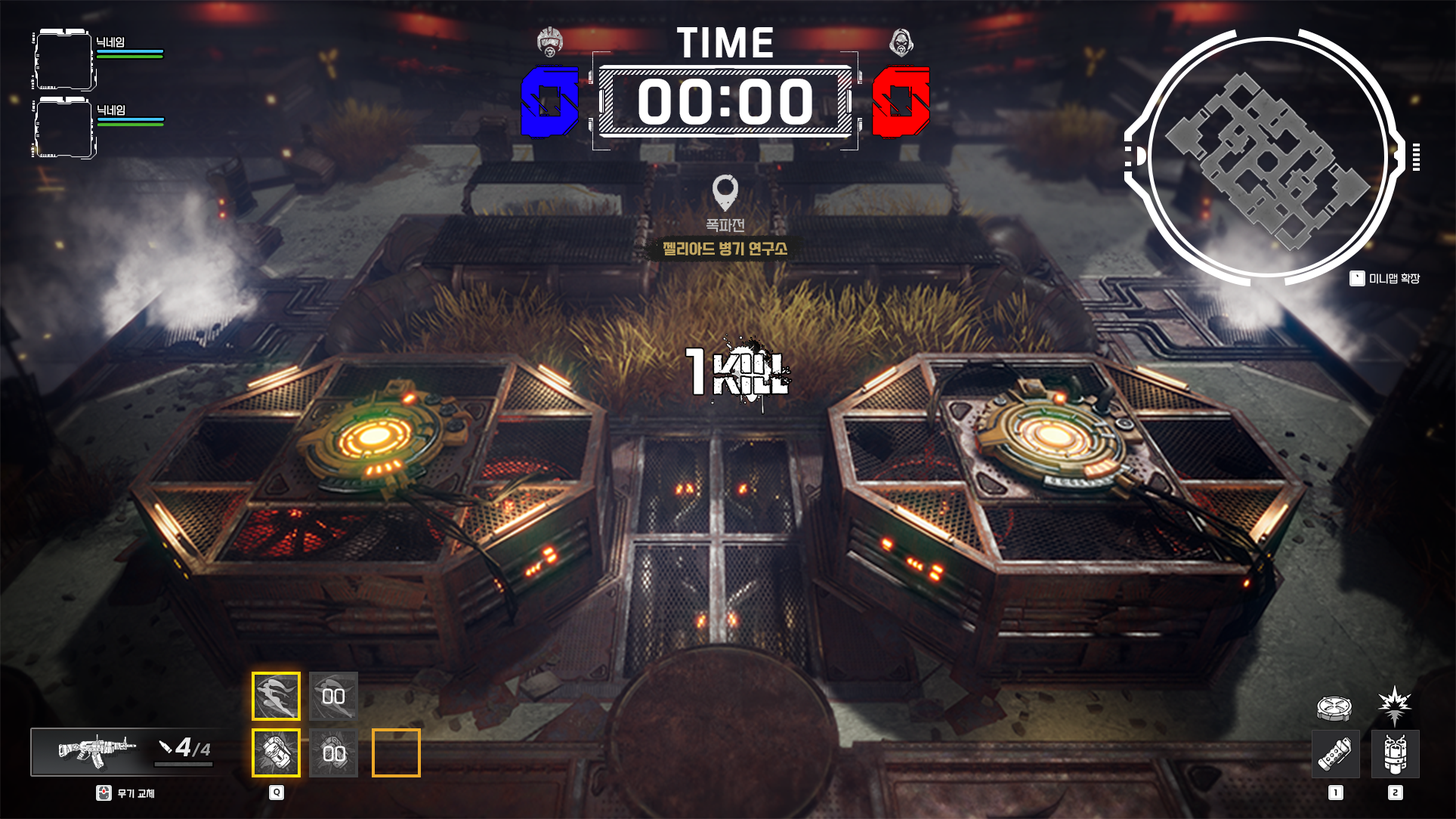
<style>
.page{position:relative;width:1456px;height:819px}
.page>*{position:absolute;margin:0}
.t1{font:36.3px "SEBANGGothicBold";letter-spacing:0.1em;color:#ffffff}
.t2{font:10.6px "SEBANGGothic";color:#ffffff}
.t3{font:54.4px "SEBANGGothicBold";letter-spacing:0.1em;color:#ffffff}
.t4{font:14.4px "SEBANGGothic";color:#bfbfc0}
.t5{font:14.4px "SEBANGGothicBold";color:#c1a661}
.t6{font:54.4px "SEBANGGothicBold";color:#ffffff}
.t7{font:18.1px "SEBANGGothic";color:#ffffff}
.t8{font:14.4px "SEBANGGothicBold";letter-spacing:0.1em;color:#9d9d9d;font-style:italic}
.t9{font:22.7px "SEBANGGothicBold";letter-spacing:0.1em;color:#e9e9e9;font-style:italic}
.t10{font:9.1px "SEBANGGothic";letter-spacing:0.04em;color:#ffffff}
</style>
<div class="page">
<p class="t1" style="left:677px;top:27px;width:96px;height:30px">TIME</p>
<p class="t2" style="left:97px;top:37px;width:28px;height:11px">닉네임</p>
<p class="t3" style="left:638px;top:79px;width:174px;height:46px">00:00</p>
<p class="t2" style="left:97px;top:105px;width:28px;height:11px">닉네임</p>
<p class="t4" style="left:706px;top:218px;width:38px;height:15px">폭파전</p>
<p class="t5" style="left:663px;top:242px;width:124px;height:14px">젤리아드 병기 연구소</p>
<p class="t6" style="left:686px;top:348px;width:17px;height:46px">1</p>
<p class="t7" style="left:323px;top:688px;width:22px;height:16px">00</p>
<p class="t8" style="left:175px;top:737px;width:36px;height:20px"><span class="t9">4</span>/4</p>
<p class="t7" style="left:323px;top:746px;width:22px;height:16px">00</p>
<p class="t10" style="left:118px;top:789px;width:36px;height:10px">무기 교체</p>
</div>
